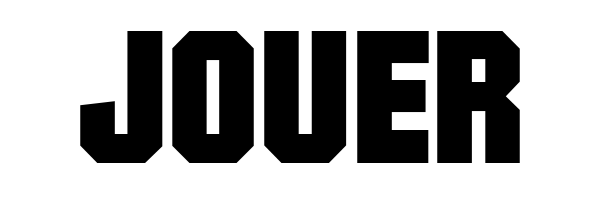
<style>
.page{position:relative;width:600px;height:200px;background:#ffffff}
.page>*{position:absolute;margin:0}
.t1{font:183.3px "Autumn";color:#000000}
</style>
<div class="page">
<p class="t1" style="left:80px;top:31px;width:440px;height:132px">JOUER</p>
</div>
